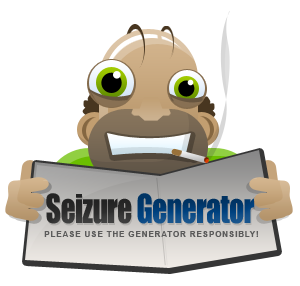
<style>
.page{position:relative;width:300px;height:286px;background:#ffffff}
.page>*{position:absolute;margin:0}
.t1{font:36.7px "Impact";letter-spacing:-0.025em;color:#004280;scale:0.82 1}
.t2{font:36.7px "Impact";letter-spacing:-0.025em;color:#2d2d2d;scale:0.82 1}
.t3{font:8.3px "Arial-BoldMT";letter-spacing:0.08em;color:#5b5b5b;text-transform:uppercase}
</style>
<div class="page">
<p class="t1" style="left:46px;top:193px;width:208px;height:31px"><span class="t2">Seizure </span>Generator</p>
<p class="t3" style="left:44px;top:231px;width:214px;height:6px">Please use the generator responsibly!</p>
</div>
